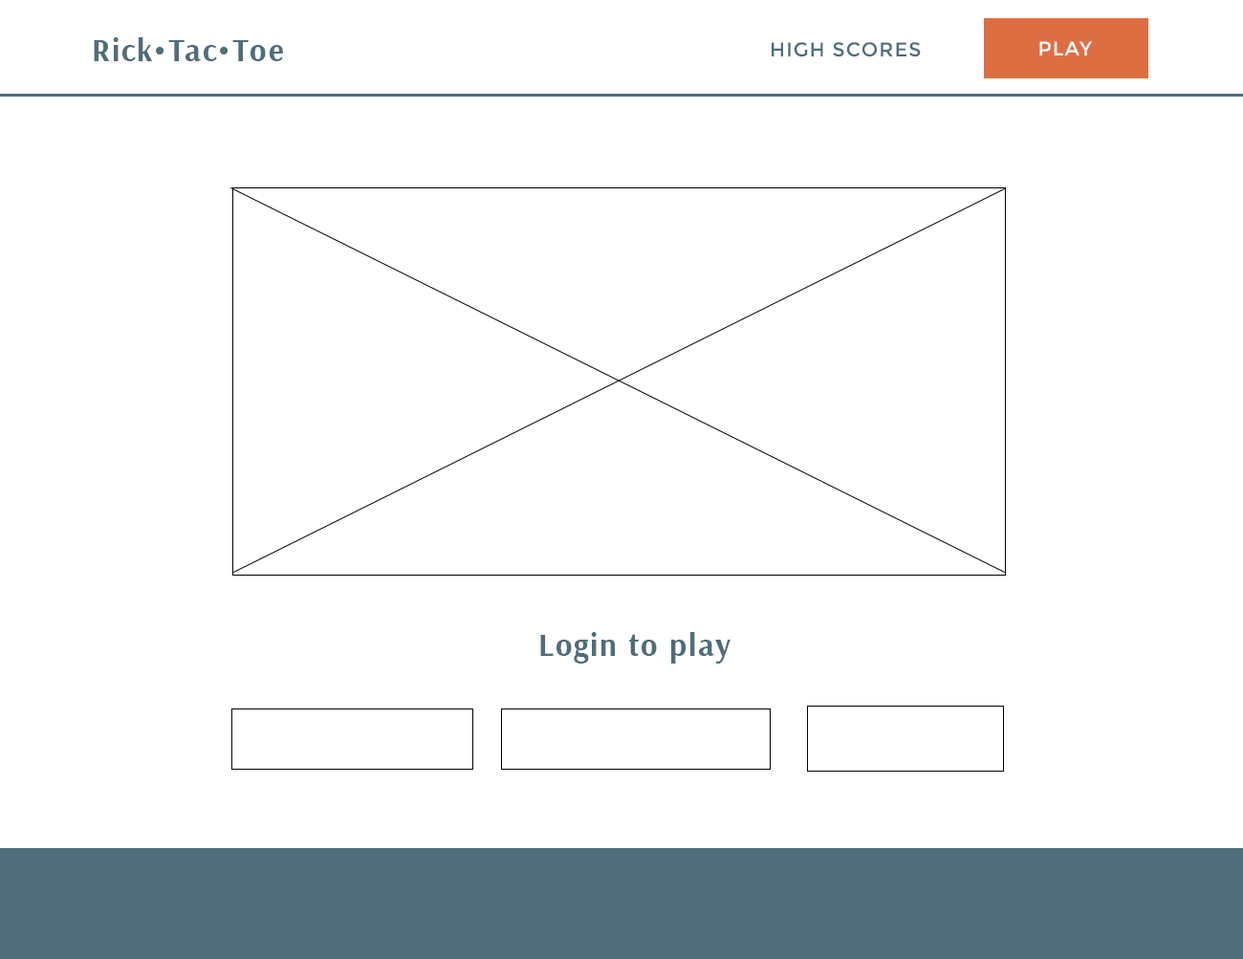
<style>
.page{position:relative;width:1243px;height:959px;background:#ffffff}
.page>*{position:absolute;margin:0}
.t1{font:31.9px "Arsenal-Bold";letter-spacing:0.05em;color:#4f6d7a}
.t2{font:19.9px "Montserrat-Regular";letter-spacing:0.05em;color:#ffffff}
.t3{font:19.9px "Montserrat-Regular";letter-spacing:0.05em;color:#4f6d7a}
</style>
<div class="page">
<p class="t1" style="left:94px;top:37px;width:189px;height:24px">Rick•Tac•Toe</p>
<p class="t2" style="left:1039px;top:41px;width:53px;height:14px">PLAY</p>
<p class="t3" style="left:772px;top:42px;width:149px;height:15px">HIGH SCORES</p>
<p class="t1" style="left:540px;top:632px;width:191px;height:32px">Login to play</p>
</div>
